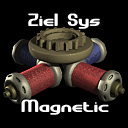
<style>
.page{position:relative;width:128px;height:128px;background:#000000}
.page>*{position:absolute;margin:0}
.t1{font:18px "GravitateBRK";color:#ffffff}
</style>
<div class="page">
<p class="t1" style="left:28px;top:13px;width:72px;height:16px">Ziel Sys</p>
<p class="t1" style="left:21px;top:99px;width:88px;height:16px">Magnetic</p>
</div>
